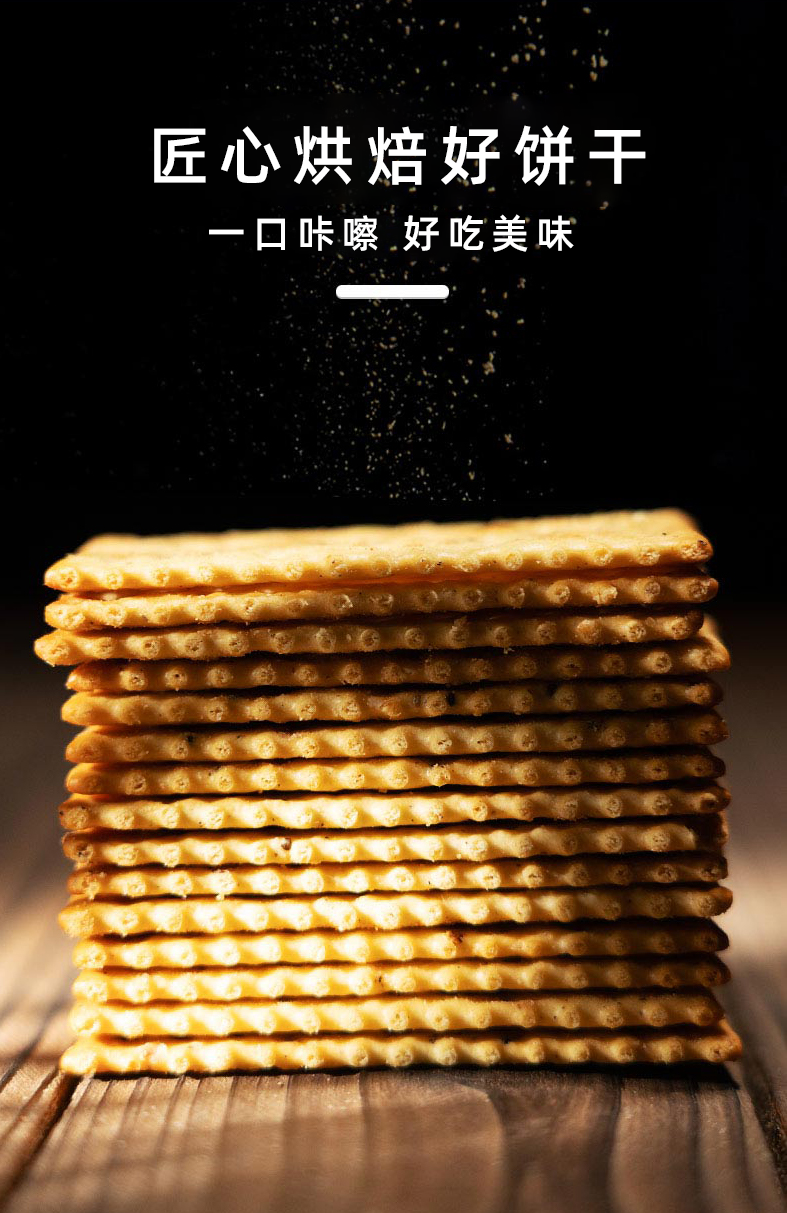
<style>
.page{position:relative;width:787px;height:1213px;background:#000000}
.page>*{position:absolute;margin:0}
.t1{font:64.2px "AlibabaPuHuiTi-Medium";letter-spacing:0.16em;color:#ffffff}
.t2{font:39px "AlibabaPuHuiTi-Medium";letter-spacing:0.16em;color:#ffffff}
</style>
<div class="page">
<p class="t1" style="left:154px;top:125px;width:492px;height:61px">匠心烘焙好饼干</p>
<p class="t2" style="left:209px;top:214px;width:365px;height:38px">一口咔嚓 好吃美味</p>
</div>
